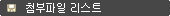
<style>
.page{position:relative;width:170px;height:16px;background:#474747}
.page>*{position:absolute;margin:0}
.t1{font:11px "Gulim";letter-spacing:-0.05em;color:#ffffff;text-transform:uppercase}
</style>
<div class="page">
<p class="t1" style="left:26px;top:3px;width:75px;height:10px">첨부파일 리스트</p>
</div>
